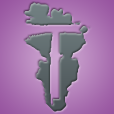
<style>
.page{position:relative;width:114px;height:114px}
.page>*{position:absolute;margin:0}
.t1{font:99px "VTKSREFUSED";color:#636e71}
</style>
<div class="page">
<p class="t1" style="left:24px;top:2px;width:67px;height:110px">T</p>
</div>
